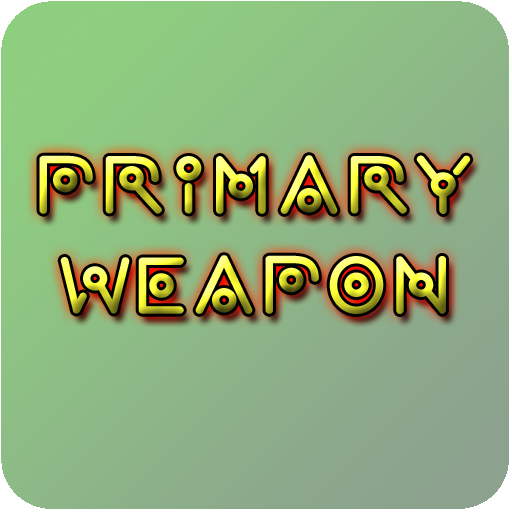
<style>
.page{position:relative;width:512px;height:512px}
.page>*{position:absolute;margin:0}
.t1{font:83.3px "wearealien!!"}
</style>
<div class="page">
<p class="t1" style="left:39px;top:155px;width:432px;height:159px;text-align:center">Primary<br>Weapon</p>
</div>
